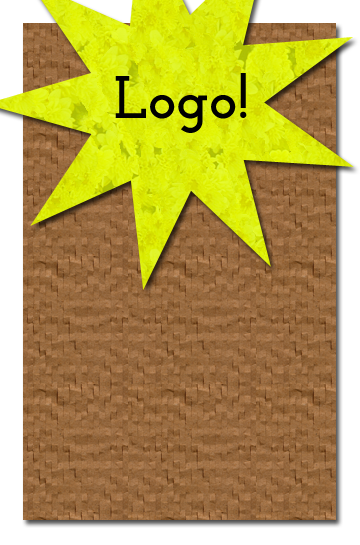
<style>
.page{position:relative;width:360px;height:545px}
.page>*{position:absolute;margin:0}
.t1{font:60px "JosefinSlab-Bold";color:#000000}
</style>
<div class="page">
<p class="t1" style="left:115px;top:73px;width:132px;height:60px">Logo!</p>
</div>
